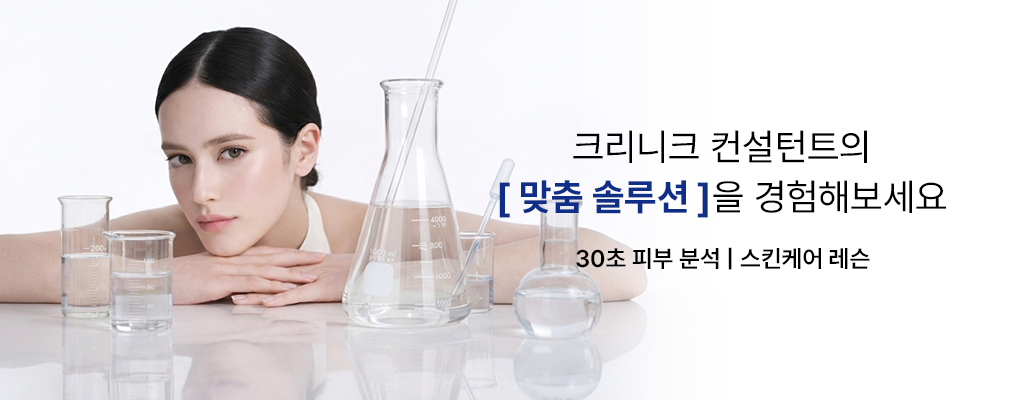
<style>
.page{position:relative;width:1024px;height:400px;background:#ffffff}
.page>*{position:absolute;margin:0}
.t1{font:37.3px/46.7px "Pretendard-Regular";color:#000000}
.t2{font:37.3px/46.7px "Pretendard-Bold";color:#0e2e87}
.t3{font:24px "Pretendard-SemiBold";color:#000000;text-transform:uppercase}
</style>
<div class="page">
<p class="t1" style="left:499px;top:130px;width:447px;height:88px;text-align:center">크리니크 컨설턴트의<br><span class="t2">[ 맞춤 솔루션 ]</span>을 경험해보세요</p>
<p class="t3" style="left:576px;top:247px;width:294px;height:23px">30초 피부 분석 | 스킨케어 레슨</p>
</div>
